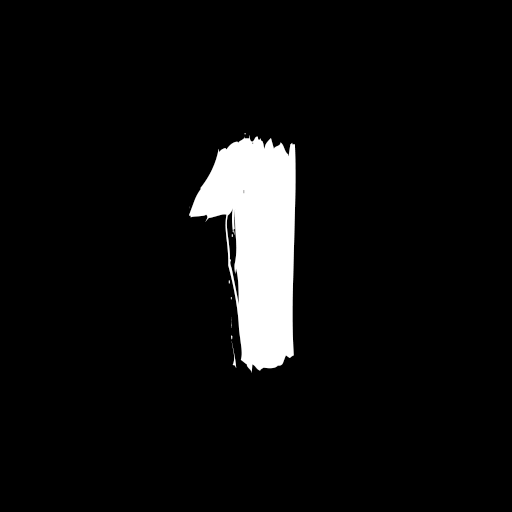
<style>
.page{position:relative;width:512px;height:512px;background:#000000}
.page>*{position:absolute;margin:0}
.t1{font:300px "appopaint-Regular";color:#ffffff}
</style>
<div class="page">
<p class="t1" style="left:189px;top:133px;width:107px;height:240px">1</p>
</div>
